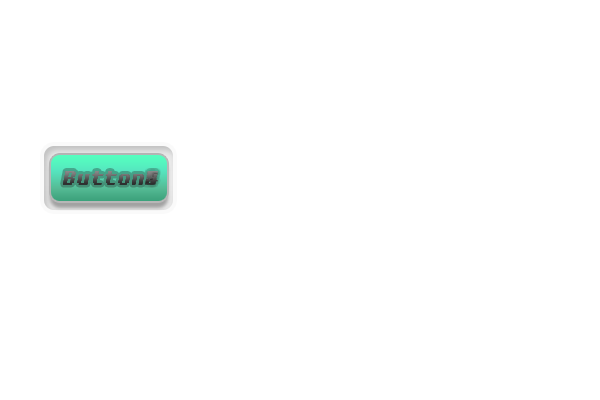
<style>
.page{position:relative;width:600px;height:400px;background:#ffffff}
.page>*{position:absolute;margin:0}
.t1{font:24px "Fixedsys";font-style:italic;scale:1.14 1}
</style>
<div class="page">
<p class="t1" style="left:63px;top:171px;width:94px;height:14px">Button1</p>
<p class="t1" style="left:63px;top:171px;width:95px;height:14px">Button2</p>
<p class="t1" style="left:63px;top:171px;width:95px;height:14px">Button3</p>
<p class="t1" style="left:63px;top:171px;width:95px;height:14px">Button4</p>
<p class="t1" style="left:63px;top:171px;width:95px;height:14px">Button5</p>
</div>
